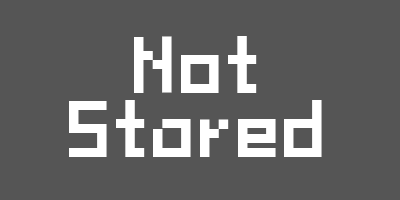
<style>
.page{position:relative;width:400px;height:200px;background:#555555}
.page>*{position:absolute;margin:0}
.t1{font:96px/64px "tama-mini02";color:#ffffff}
</style>
<div class="page">
<p class="t1" style="left:69px;top:36px;width:253px;height:121px;text-align:center">Not<br>Stared</p>
</div>
